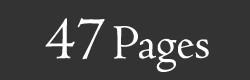
<style>
.page{position:relative;width:250px;height:80px;background:#333333}
.page>*{position:absolute;margin:0}
.t1{font:62px "Centaur";color:#ffffff}
.t2{font:50px "Centaur";color:#ffffff}
</style>
<div class="page">
<p class="t1" style="left:45px;top:18px;width:60px;height:42px">47</p>
<p class="t2" style="left:113px;top:26px;width:96px;height:46px">Pages</p>
</div>
